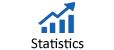
<style>
.page{position:relative;width:114px;height:50px;background:#ffffff}
.page>*{position:absolute;margin:0}
.t1{font:14.5px "Calibri";color:#000000;scale:1.03 1}
</style>
<div class="page">
<p class="t1" style="left:31px;top:38px;width:53px;height:11px">Statistics</p>
</div>
